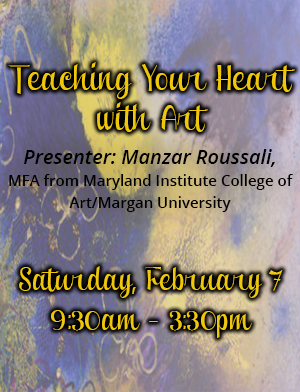
<style>
.page{position:relative;width:300px;height:392px}
.page>*{position:absolute;margin:0}
.t1{font:32px/40px "ClipperScriptFatPersonalUse";color:#efc70b}
.t2{font:36px/40px "ClipperScriptFatPersonalUse";color:#efc70b}
.t3{font:15px/22px "OpenSans-Semibold";color:#000000}
.t4{font:20px/22px "OpenSans-SemiboldItalic";color:#000000}
</style>
<div class="page">
<p class="t1" style="left:8px;top:62px;width:287px;height:276px;text-align:center"><span class="t2">Teaching Your Heart with Art<br><br><br><br></span>Saturday, February 7<br>9:30am - 3:30pm</p>
<p class="t3" style="left:9px;top:149px;width:284px;height:63px;text-align:center"><span class="t4">Presenter: Manzar Roussali, <br></span>MFA from Maryland Institute College of Art/Margan University</p>
</div>
